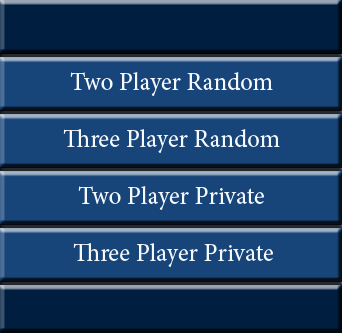
<style>
.page{position:relative;width:342px;height:333px;background:#184579}
.page>*{position:absolute;margin:0}
.t1{font:25px "MinionPro-Regular";color:#f6f9fd}
</style>
<div class="page">
<p class="t1" style="left:70px;top:72px;width:203px;height:24px">Two Player Random</p>
<p class="t1" style="left:63px;top:129px;width:217px;height:24px">Three Player Random</p>
<p class="t1" style="left:78px;top:186px;width:186px;height:24px">Two Player Private</p>
<p class="t1" style="left:73px;top:243px;width:200px;height:24px">Three Player Private</p>
</div>
